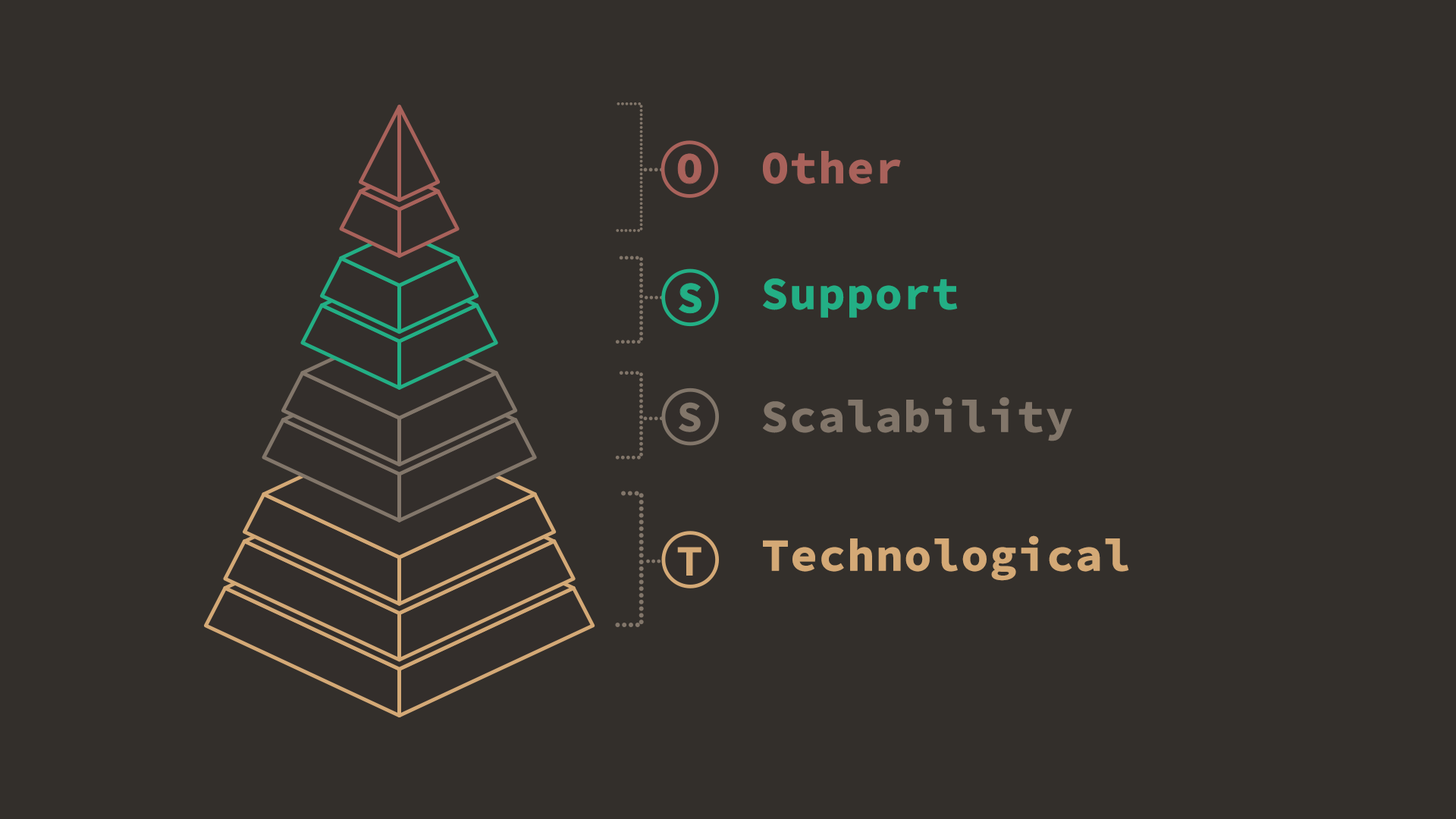
<style>
.page{position:relative;width:1456px;height:819px;background:#332f2b}
.page>*{position:absolute;margin:0}
.t1{font:45.5px "SourceCodeProForPowerline-Bold";color:#a9625b;font-weight:bold}
.t2{font:45.5px "SourceCodeProForPowerline-Bold";color:#23af85;font-weight:bold}
.t3{font:45.5px "SourceCodeProForPowerline-Bold";color:#82766a;font-weight:bold}
.t4{font:45.5px "SourceCodeProForPowerline-Bold";color:#d4a976;font-weight:bold}
</style>
<div class="page">
<p class="t1" style="left:763px;top:151px;width:138px;height:33px">Other</p>
<p class="t2" style="left:763px;top:278px;width:195px;height:40px">Support</p>
<p class="t3" style="left:763px;top:397px;width:309px;height:44px">Scalability</p>
<p class="t4" style="left:763px;top:535px;width:366px;height:46px">Technological</p>
</div>
